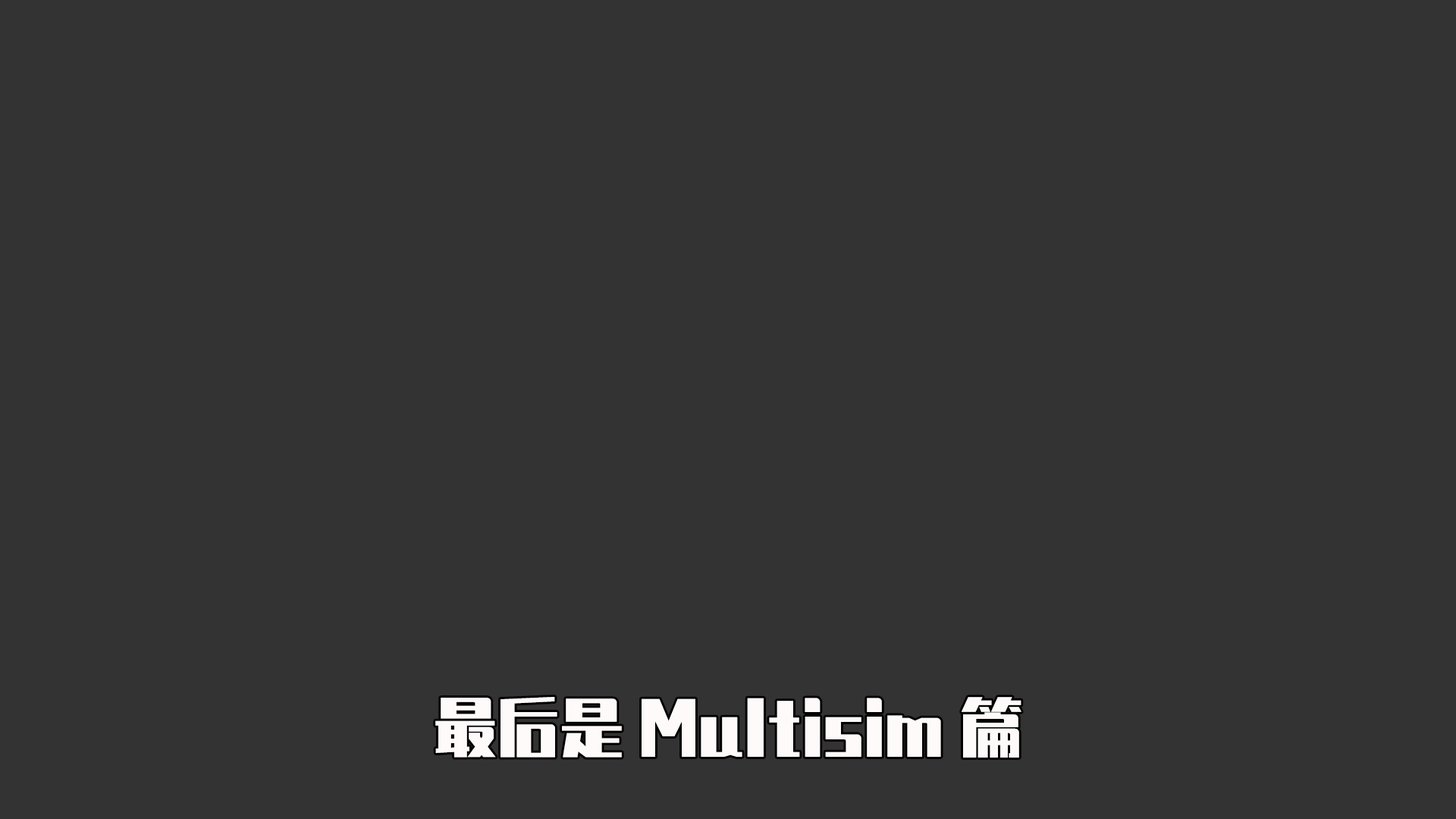
<style>
.page{position:relative;width:1456px;height:819px;background:#333333}
.page>*{position:absolute;margin:0}
.t1{font:63.2px "ZhenyanGB-Regular";color:#fefafa}
</style>
<div class="page">
<p class="t1" style="left:435px;top:697px;width:586px;height:61px">最后是Multisim篇</p>
</div>
